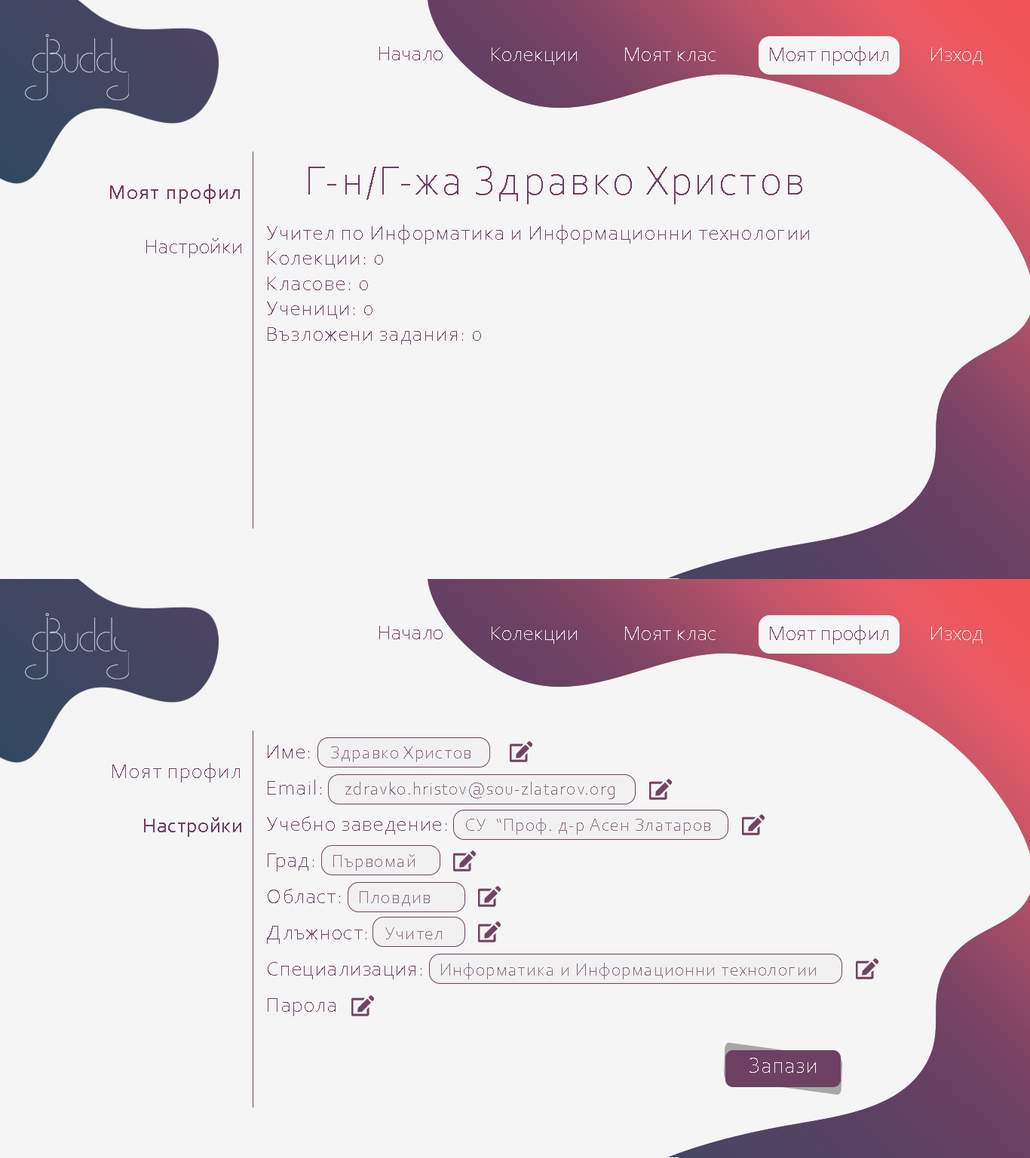
<style>
.page{position:relative;width:1030px;height:1158px;background:#f5f5f5}
.page>*{position:absolute;margin:0}
.t1{font:21.1px "CorbelLight";letter-spacing:0.01em;color:#744263}
.t2{font:21.1px "CorbelLight";letter-spacing:0.01em;color:#f5f5f5}
.t3{font:21.1px "CorbelLight";letter-spacing:0.01em;color:#6d4163}
.t4{font:21.1px "CorbelLight";letter-spacing:0.05em;color:#6d4163}
.t5{font:42.2px "CorbelLight";letter-spacing:0.05em;color:#6d4163}
.t6{font:21.1px/45.2px "CorbelLight";letter-spacing:0.05em;color:#6d4163}
.t7{font:21.1px "Corbel";letter-spacing:0.05em;color:#6d4163}
.t8{font:18.1px/36.2px "CorbelLight";letter-spacing:0.05em;color:#85687e}
.t9{font:21.1px/36.2px "CorbelLight";letter-spacing:0.05em;color:#6d4163}
.t10{font:21.1px "Corbel";letter-spacing:0.01em;color:#6d4163}
.t11{font:23.4px "CorbelLight";letter-spacing:0.01em;color:#f5f5f5}
</style>
<div class="page">
<p class="t1" style="left:379px;top:47px;width:64px;height:13px">Начало</p>
<p class="t2" style="left:492px;top:47px;width:85px;height:18px">Колекции</p>
<p class="t2" style="left:625px;top:47px;width:90px;height:14px">Моят клас</p>
<p class="t3" style="left:770px;top:46px;width:118px;height:20px">Моят профил</p>
<p class="t2" style="left:931px;top:47px;width:51px;height:18px">Изход</p>
<p class="t4" style="left:267px;top:166px;width:542px;height:179px;text-align:center"><span class="t5">Г-н/Г-жа Здравко Христов<br></span><span class="t6">Учител по Информатика и Информационни технологии<br></span>Колекции: 0<br>Класове: 0<br>Ученици: 0<br>Възложени задания: 0</p>
<p class="t7" style="left:110px;top:184px;width:130px;height:20px">Моят профил</p>
<p class="t3" style="left:146px;top:238px;width:95px;height:20px">Настройки</p>
<p class="t1" style="left:379px;top:626px;width:64px;height:13px">Начало</p>
<p class="t2" style="left:492px;top:626px;width:85px;height:18px">Колекции</p>
<p class="t2" style="left:625px;top:626px;width:90px;height:14px">Моят клас</p>
<p class="t3" style="left:770px;top:625px;width:118px;height:20px">Моят профил</p>
<p class="t2" style="left:931px;top:626px;width:51px;height:18px">Изход</p>
<p class="t8" style="left:267px;top:745px;width:549px;height:271px"><span class="t9">Име:    </span>Здравко Христов <br><span class="t9">Email:    </span>zdravko.hristov@sou-zlatarov.org<br><span class="t9">Учебно заведение:   </span>СУ  “Проф. д-р Асен Златаров<br><span class="t9">Град:   </span>Първомай<br><span class="t9">Област:   </span>Пловдив<br><span class="t9">Длъжност:   </span>Учител<br><span class="t9">Специализация:   </span>Информатика и Информационни технологии <br><span class="t9">Парола</span></p>
<p class="t4" style="left:112px;top:763px;width:128px;height:20px">Моят профил</p>
<p class="t10" style="left:144px;top:817px;width:97px;height:20px">Настройки</p>
<p class="t11" style="left:749px;top:1058px;width:67px;height:15px">Запази</p>
</div>
